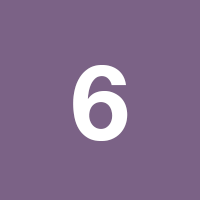
<style>
.page{position:relative;width:200px;height:200px;background:#7b6286}
.page>*{position:absolute;margin:0}
.t1{font:105px "HelveticaNeue-Bold";color:#ffffff}
</style>
<div class="page">
<p class="t1" style="left:73px;top:65px;width:55px;height:76px">6</p>
</div>
